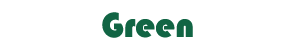
<style>
.page{position:relative;width:300px;height:50px;background:#ffffff}
.page>*{position:absolute;margin:0}
.t1{font:36px "Bauhaus93";color:#116544}
</style>
<div class="page">
<p class="t1" style="left:102px;top:12px;width:91px;height:26px">Green</p>
</div>
